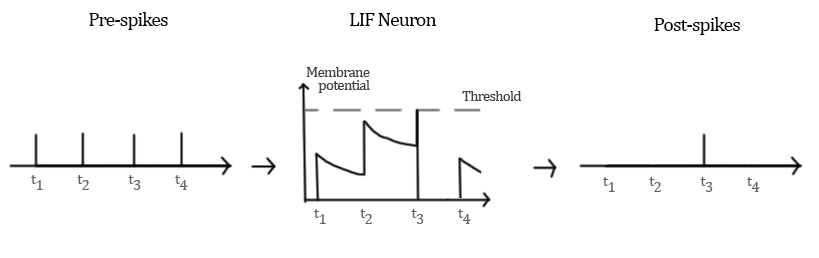
<style>
.page{position:relative;width:819px;height:258px;background:#ffffff}
.page>*{position:absolute;margin:0}
.t1{font:20px "CambriaMath";letter-spacing:-0.05em;color:#000000}
.t2{font:15px/13px "CambriaMath";letter-spacing:-0.05em;color:#414141}
.t3{font:15px "CambriaMath";letter-spacing:-0.05em;color:#414141}
.t4{font:15px "CambriaMath";letter-spacing:-0.05em;color:#606060}
</style>
<div class="page">
<p class="t1" style="left:89px;top:12px;width:79px;height:18px">Pre-spikes</p>
<p class="t1" style="left:350px;top:13px;width:87px;height:13px">LIF Neuron</p>
<p class="t1" style="left:654px;top:17px;width:86px;height:18px">Post-spikes</p>
<p class="t2" style="left:306px;top:67px;width:64px;height:26px;text-align:right">Membrane<br>potential</p>
<p class="t3" style="left:462px;top:91px;width:60px;height:10px">Threshold</p>
<p class="t4" style="left:31px;top:175px;width:157px;height:15px">t1     t2           t3 t4</p>
<p class="t4" style="left:603px;top:177px;width:157px;height:15px">t1     t2           t3 t4</p>
<p class="t4" style="left:314px;top:209px;width:157px;height:15px">t1     t2           t3 t4</p>
</div>
